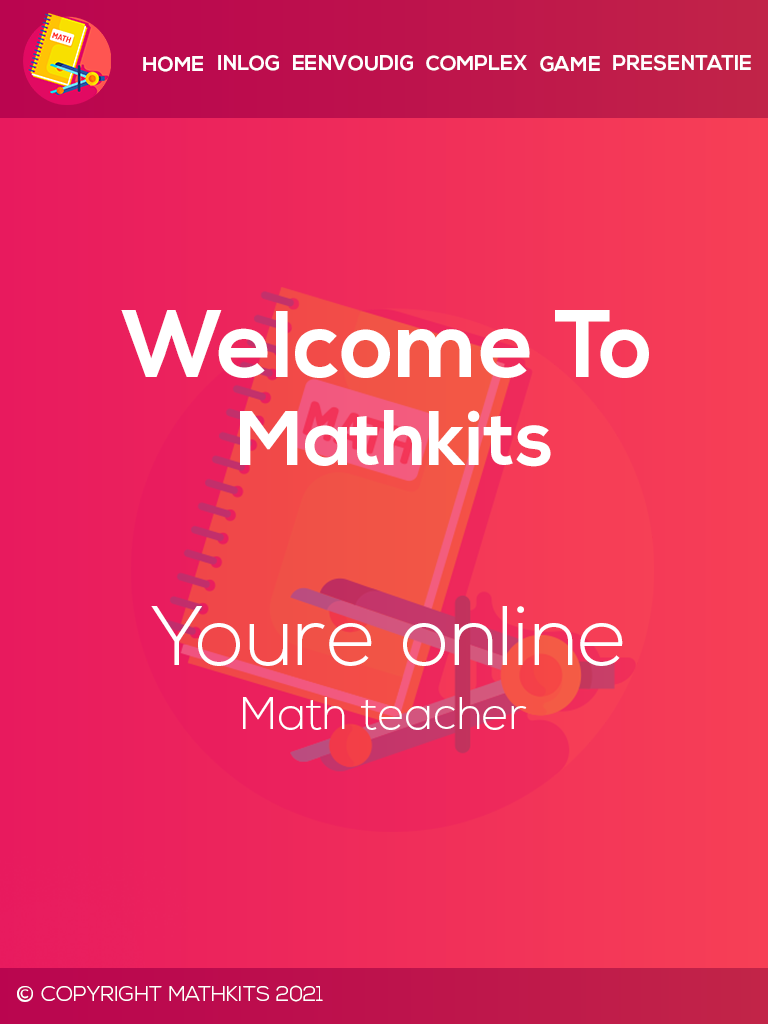
<style>
.page{position:relative;width:768px;height:1024px}
.page>*{position:absolute;margin:0}
.t1{font:20.6px "NexaBold";color:#ffffff}
.t2{font:94.9px "NexaBold";color:#ffffff}
.t3{font:77.9px "NexaBold";color:#ffffff}
.t4{font:84.3px "NexaLight";color:#ffffff}
.t5{font:45.5px "NexaLight";color:#ffffff}
.t6{font:21.3px "NexaLight";color:#ffffff}
</style>
<div class="page">
<p class="t1" style="left:143px;top:56px;width:60px;height:16px">HOME</p>
<p class="t1" style="left:218px;top:55px;width:61px;height:16px">INLOG</p>
<p class="t1" style="left:293px;top:55px;width:120px;height:16px">EENVOUDIG</p>
<p class="t1" style="left:426px;top:55px;width:101px;height:16px">COMPLEX</p>
<p class="t1" style="left:540px;top:56px;width:60px;height:16px">GAME</p>
<p class="t1" style="left:613px;top:55px;width:138px;height:16px">PRESENTATIE</p>
<p class="t2" style="left:121px;top:310px;width:528px;height:68px">Welcome To</p>
<p class="t3" style="left:240px;top:410px;width:311px;height:57px">Mathkits</p>
<p class="t4" style="left:151px;top:606px;width:472px;height:60px">Youre online</p>
<p class="t5" style="left:243px;top:697px;width:284px;height:33px">Math teacher</p>
<p class="t6" style="left:17px;top:985px;width:306px;height:17px">© COPYRIGHT MATHKITS 2021</p>
</div>
